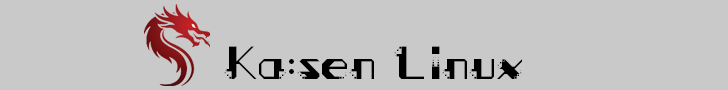
<style>
.page{position:relative;width:728px;height:90px;background:#c9c9c9}
.page>*{position:absolute;margin:0}
.t1{font:40px "MANGAHAS-2020";color:#000000}
</style>
<div class="page">
<p class="t1" style="left:224px;top:46px;width:298px;height:33px">Ka:sen Linux</p>
</div>
